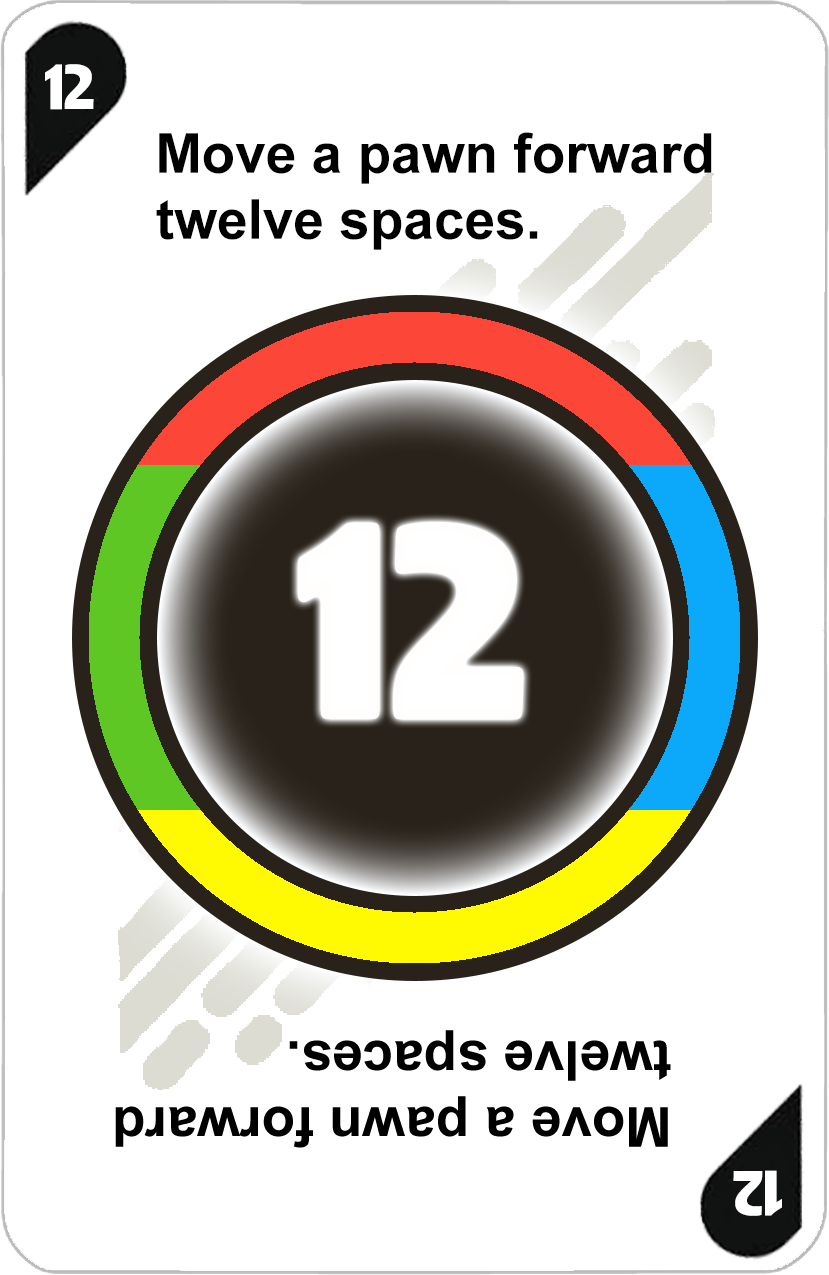
<style>
.page{position:relative;width:829px;height:1275px;background:#ffffff}
.page>*{position:absolute;margin:0}
.t1{font:72px "AdGothic-Regular";color:#ffffff}
.t2{font:55px "Arial-BoldMT";color:#000000}
.t3{font:300px "AdGothic-Regular";color:#ffffff}
</style>
<div class="page">
<p class="t1" style="left:45px;top:64px;width:49px;height:46px">12</p>
<p class="t2" style="left:156px;top:132px;width:556px;height:118px">Move a pawn forward <br>twelve spaces.</p>
<p class="t3" style="left:303px;top:527px;width:72px;height:187px">1</p>
<p class="t3" style="left:398px;top:527px;width:121px;height:188px">2</p>
</div>
